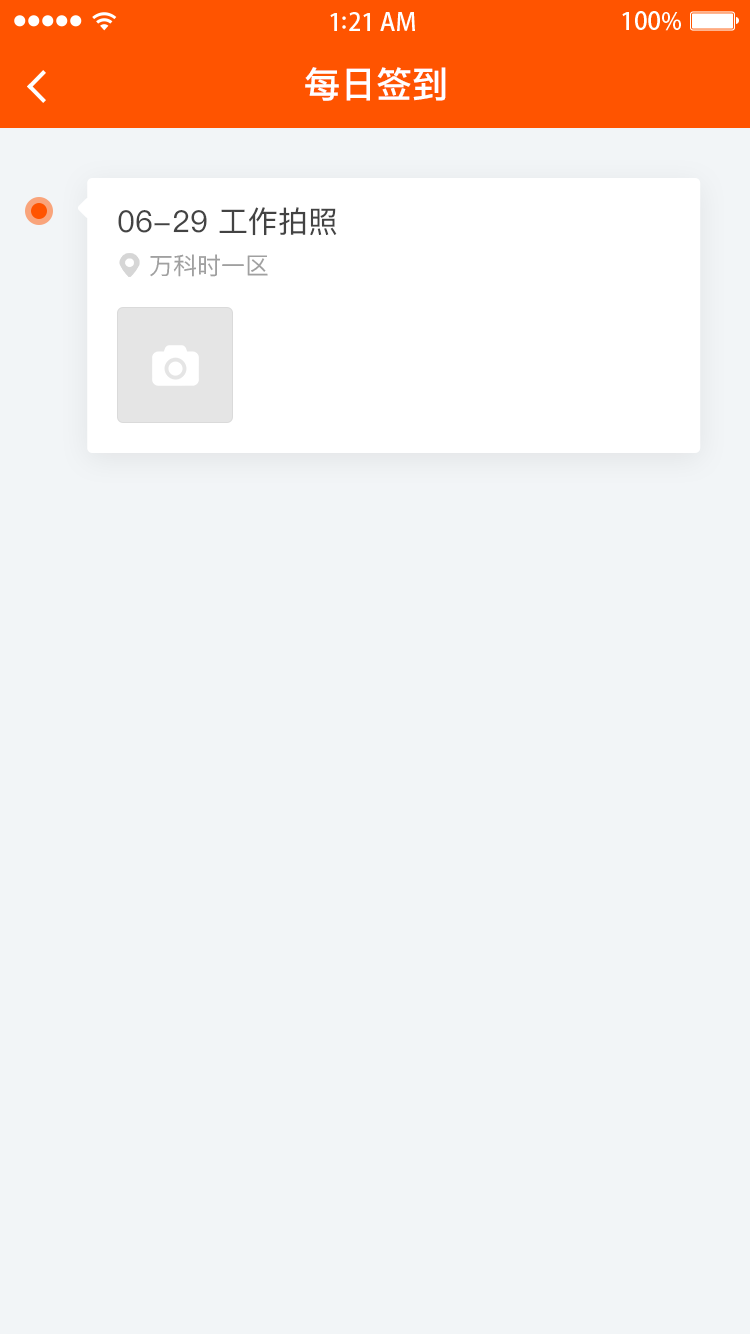
<style>
.page{position:relative;width:750px;height:1334px;background:#f2f5f7}
.page>*{position:absolute;margin:0}
.t1{font:36px "PingFangSC-Medium";color:#ffffff}
.t2{font:30px "PingFangSC-Regular";color:#434343}
.t3{font:24px "PingFangSC-Regular";color:#a0a0a0}
</style>
<div class="page">
<p class="t1" style="left:305px;top:67px;width:141px;height:34px">每日签到</p>
<p class="t2" style="left:118px;top:207px;width:219px;height:29px">06-29 工作拍照</p>
<p class="t3" style="left:150px;top:254px;width:118px;height:23px">万科时一区</p>
</div>
